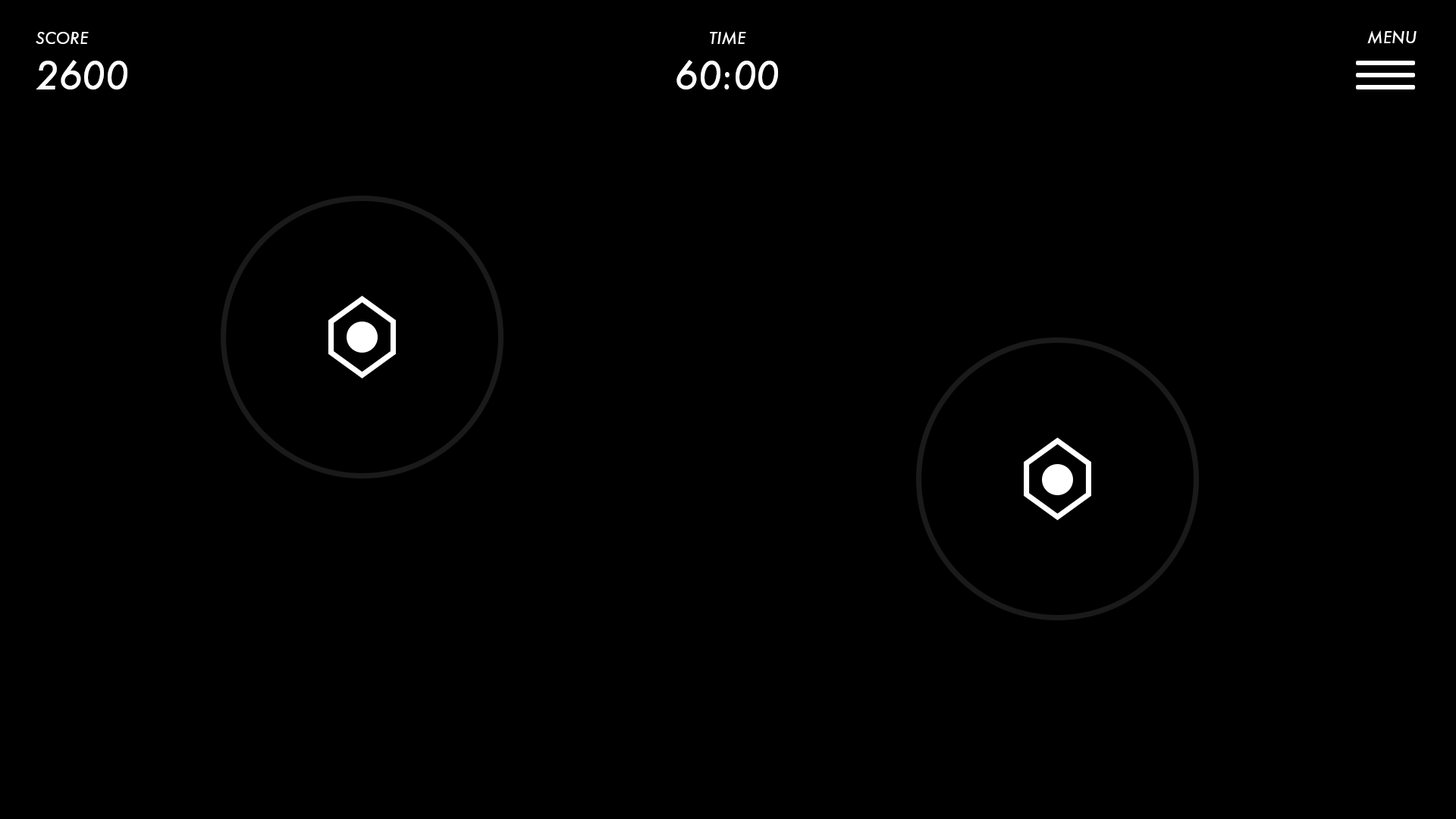
<style>
.page{position:relative;width:1456px;height:819px;background:#000000}
.page>*{position:absolute;margin:0}
.t1{font:16.1px "Futura-MediumItalic";color:#ffffff}
.t2{font:37.6px "Futura-MediumItalic";color:#ffffff}
</style>
<div class="page">
<p class="t1" style="left:36px;top:32px;width:53px;height:12px">SCORE</p>
<p class="t1" style="left:710px;top:31px;width:36px;height:14px">TIME</p>
<p class="t1" style="left:1367px;top:30px;width:50px;height:14px">MENU</p>
<p class="t2" style="left:36px;top:60px;width:91px;height:29px">2600</p>
<p class="t2" style="left:676px;top:60px;width:102px;height:29px">60:00</p>
</div>
